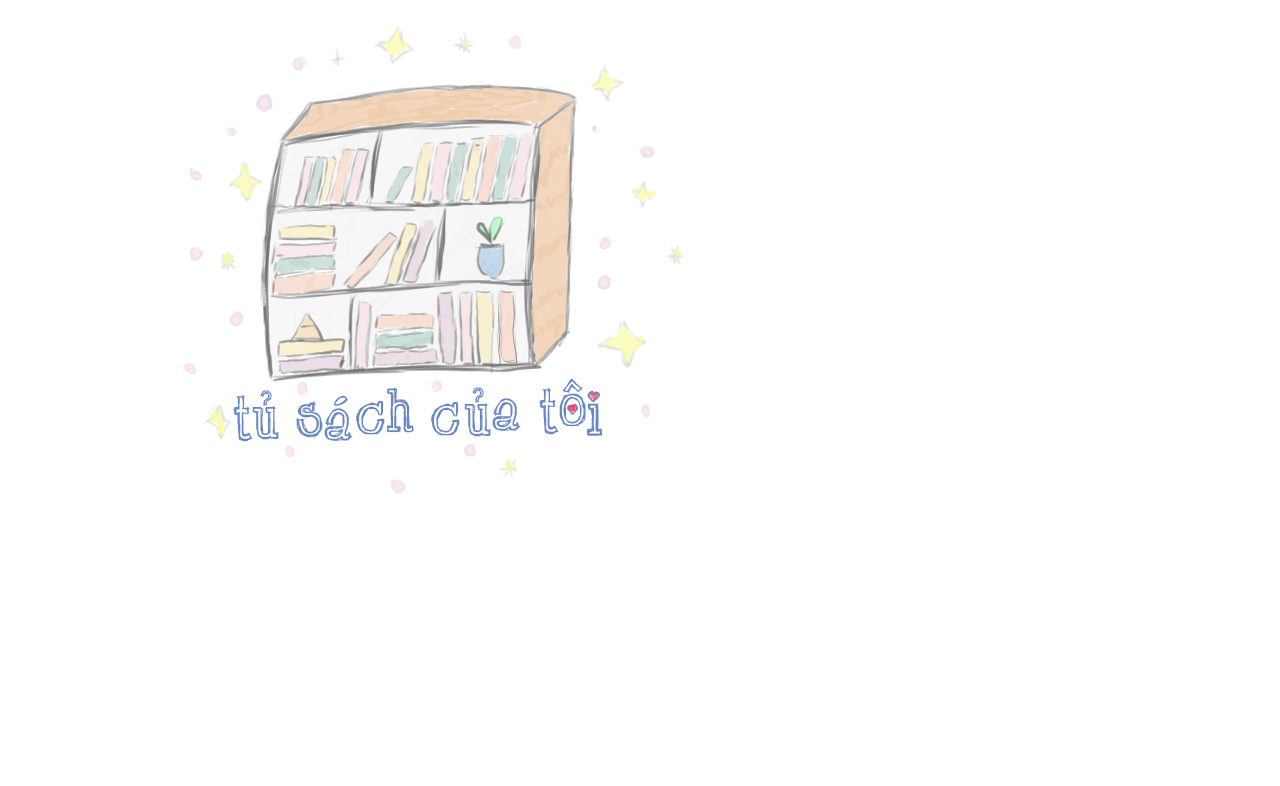
<style>
.page{position:relative;width:1280px;height:786px;background:#ffffff}
.page>*{position:absolute;margin:0}
.t1{font:54px "UTM-Chickenhawk";color:#6887c6}
</style>
<div class="page">
<p class="t1" style="left:252px;top:390px;width:27px;height:50px">ủ</p>
<p class="t1" style="left:386px;top:387px;width:28px;height:46px">h</p>
<p class="t1" style="left:464px;top:387px;width:27px;height:50px">ủ</p>
<p class="t1" style="left:539px;top:387px;width:20px;height:48px">T</p>
<p class="t1" style="left:559px;top:378px;width:27px;height:49px">ô</p>
<p class="t1" style="left:586px;top:390px;width:17px;height:46px">i</p>
<p class="t1" style="left:233px;top:394px;width:20px;height:48px">T</p>
<p class="t1" style="left:295px;top:401px;width:28px;height:37px">S</p>
<p class="t1" style="left:324px;top:395px;width:29px;height:46px">á</p>
<p class="t1" style="left:356px;top:400px;width:29px;height:35px">c</p>
<p class="t1" style="left:431px;top:401px;width:29px;height:35px">C</p>
<p class="t1" style="left:492px;top:398px;width:29px;height:33px">a</p>
</div>
